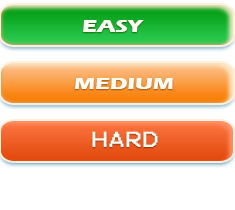
<style>
.page{position:relative;width:235px;height:210px;background:#ffffff}
.page>*{position:absolute;margin:0}
.t1{font:17.5px "ErasITC-Bold";color:#fdfdf3;text-transform:uppercase;scale:1.29 1}
.t2{font:17.4px "ErasITC-Bold";color:#fdfdf3;text-transform:uppercase;scale:1.3 1}
.t3{font:17.5px "Terminal";color:#fdfdf3;text-transform:uppercase;scale:1.29 1}
</style>
<div class="page">
<p class="t1" style="left:83px;top:20px;width:61px;height:12px">easy</p>
<p class="t2" style="left:74px;top:78px;width:99px;height:11px">medium</p>
<p class="t3" style="left:92px;top:131px;width:66px;height:16px">hard</p>
</div>
